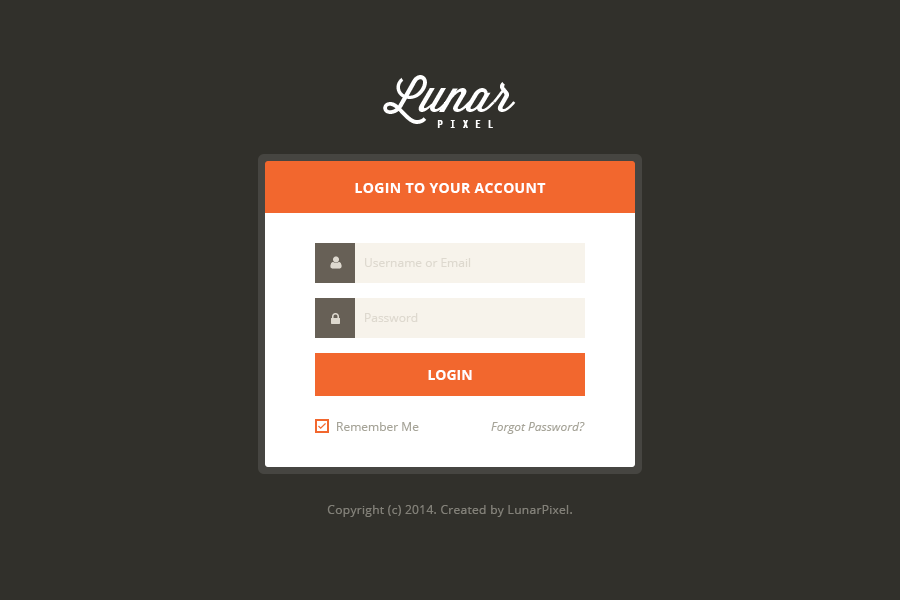
<style>
.page{position:relative;width:900px;height:600px;background:#31302b}
.page>*{position:absolute;margin:0}
.t1{font:14px "OpenSans-Bold";letter-spacing:0.025em;color:#ffffff;text-transform:uppercase}
.t2{font:12px "OpenSans";color:#ded9cf}
.t3{font:14px "OpenSans-Bold";color:#ffffff}
.t4{font:12px "OpenSans";color:#a7a599}
.t5{font:12px "OpenSans-Italic";color:#a7a599}
.t6{font:12px "OpenSans";letter-spacing:0.025em;color:#828078}
</style>
<div class="page">
<p class="t1" style="left:355px;top:183px;width:191px;height:10px">Login to your account</p>
<p class="t2" style="left:365px;top:258px;width:106px;height:9px">Username or Email</p>
<p class="t2" style="left:365px;top:313px;width:53px;height:9px">Password</p>
<p class="t3" style="left:428px;top:370px;width:44px;height:10px">LOGIN</p>
<p class="t4" style="left:337px;top:422px;width:82px;height:9px">Remember Me</p>
<p class="t5" style="left:491px;top:422px;width:94px;height:12px">Forgot Password?</p>
<p class="t6" style="left:327px;top:505px;width:245px;height:12px">Copyright (c) 2014. Created by LunarPixel.</p>
</div>
